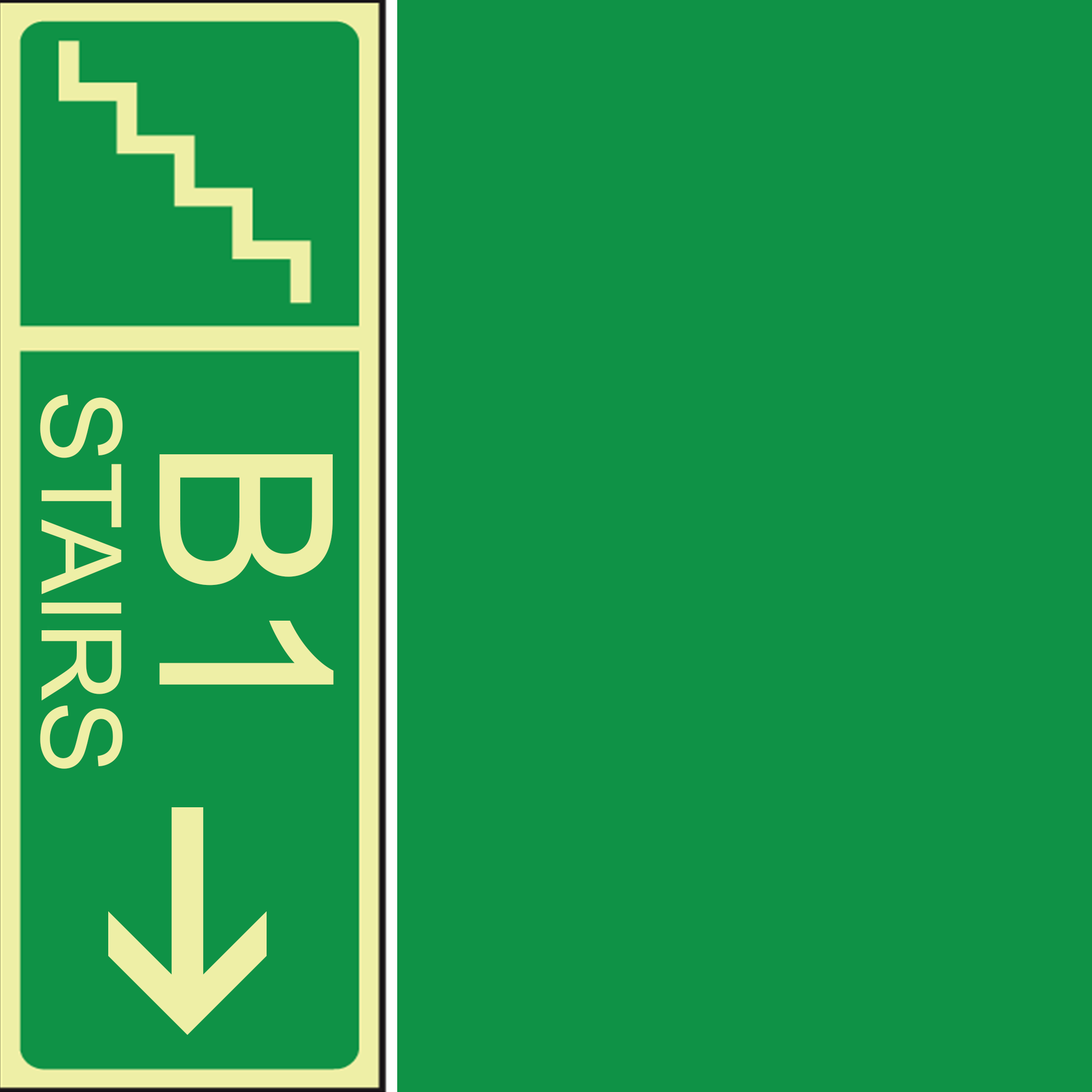
<style>
.page{position:relative;width:1092px;height:1092px;background:#0f9246}
.page>*{position:absolute;margin:0}
.t1{font:110.8px "ArialMT";letter-spacing:-0.04em;color:#eeefa6;font-weight:bold}
.t2{font:241.4px "ArialMT";letter-spacing:-0.04em;color:#eeefa6;font-weight:bold}
</style>
<div class="page">
<p class="t1" style="left:40px;top:395px;width:83px;height:374px;rotate:90deg">STAIRS</p>
<p class="t2" style="left:159px;top:454px;width:175px;height:231px;rotate:90deg">B1</p>
</div>
